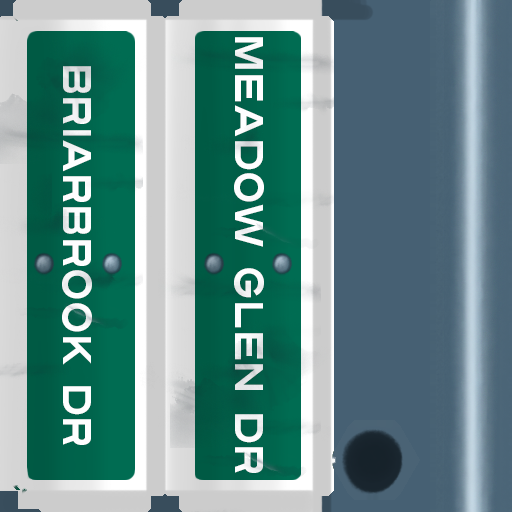
<style>
.page{position:relative;width:512px;height:512px}
.page>*{position:absolute;margin:0}
.t1{font:40px "Turnpike";color:#fefeff;scale:0.75 1}
</style>
<div class="page">
<p class="t1" style="left:234px;top:37px;width:30px;height:436px;rotate:90deg">Meadow Glen Dr</p>
<p class="t1" style="left:62px;top:66px;width:30px;height:379px;rotate:90deg">Briarbrook Dr</p>
</div>
